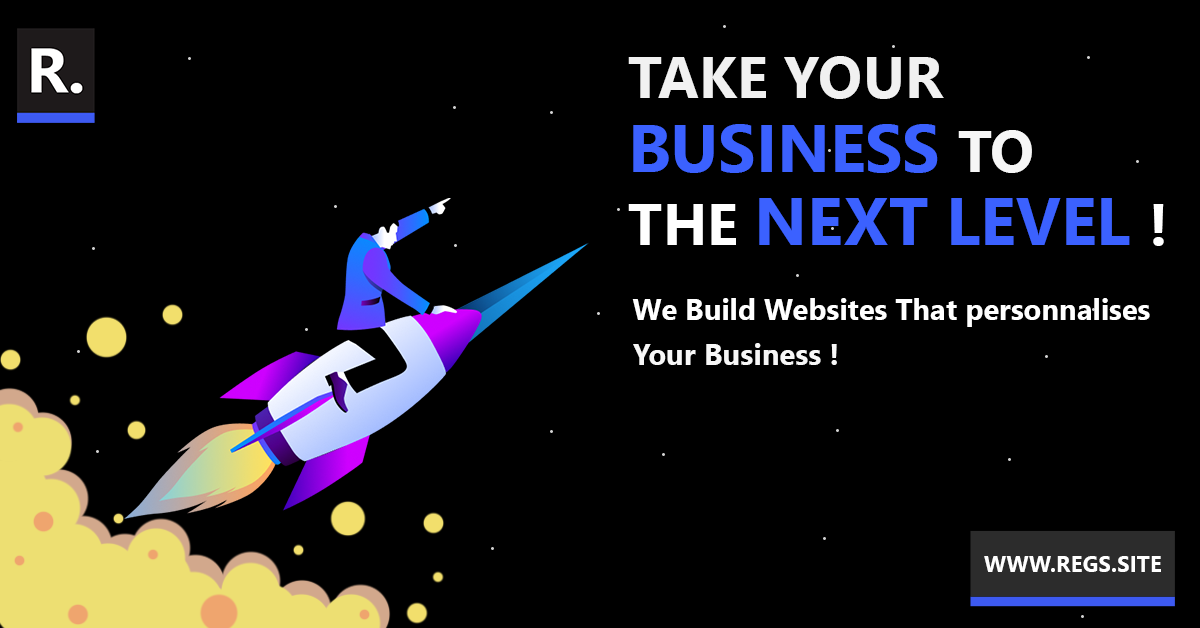
<style>
.page{position:relative;width:1200px;height:628px;background:#000000}
.page>*{position:absolute;margin:0}
.t1{font:58.3px "SegoeUI-Bold";color:#f1f1f1}
.t2{font:66.7px "SegoeUI-Bold";color:#3b61ff}
.t3{font:58.3px "SegoeUI-Bold";color:#f6f6f6}
.t4{font:58.3px "SegoeUI-Bold";color:#ffffff}
.t5{font:29.2px "SegoeUI-Bold";color:#ffffff}
.t6{font:29.4px "SegoeUI-Bold";color:#f7f7f7}
.t7{font:22.4px "SegoeUI-Bold";color:#ffffff}
</style>
<div class="page">
<p class="t1" style="left:628px;top:56px;width:316px;height:43px">TAKE YOUR</p>
<p class="t2" style="left:633px;top:124px;width:399px;height:49px">BUSINESS <span class="t3">TO</span></p>
<p class="t2" style="left:628px;top:198px;width:536px;height:48px"><span class="t4">THE </span>NEXT LEVEL <span class="t4">!</span></p>
<p class="t5" style="left:632px;top:298px;width:518px;height:29px">We Build Websites That personnalises</p>
<p class="t6" style="left:633px;top:343px;width:204px;height:22px">Your Business !</p>
<p class="t7" style="left:984px;top:556px;width:177px;height:16px">WWW.REGS.SITE</p>
</div>
